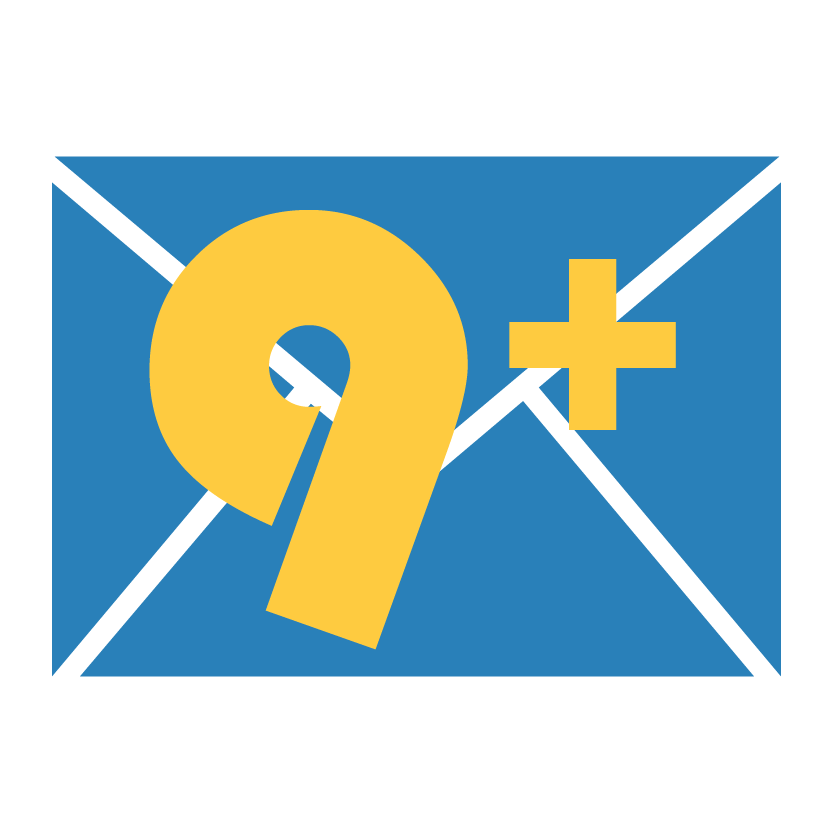
<style>
.page{position:relative;width:833px;height:833px;background:#ffffff}
.page>*{position:absolute;margin:0}
.t1{font:625px "Bauhaus93";color:#fecb40}
.t2{font:333.3px "Bauhaus93";color:#fecb40}
</style>
<div class="page">
<p class="t1" style="left:149px;top:210px;width:319px;height:440px">9</p>
<p class="t2" style="left:509px;top:259px;width:167px;height:171px">+</p>
</div>
